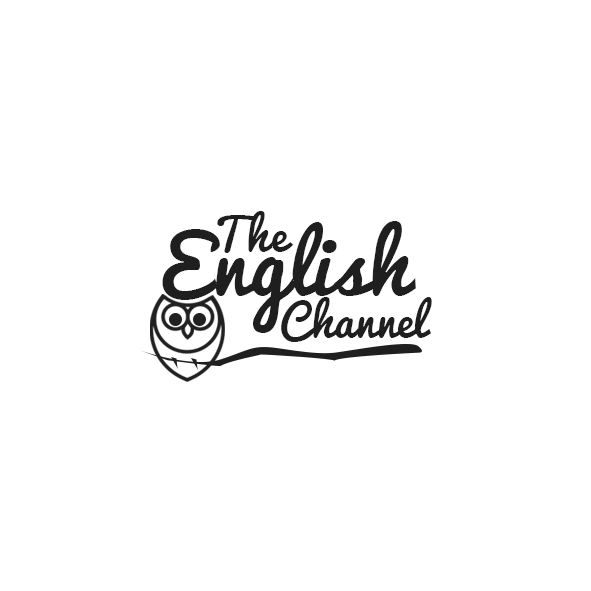
<style>
.page{position:relative;width:591px;height:591px;background:#ffffff}
.page>*{position:absolute;margin:0}
.t1{font:80.2px "Pacifico";letter-spacing:0.01em;color:#1f1f1f}
.t2{font:43.8px "Pacifico";letter-spacing:0.01em;color:#1f1f1f}
.t3{font:43.8px "Pacifico";color:#1f1f1f}
</style>
<div class="page">
<p class="t1" style="left:162px;top:221px;width:254px;height:112px">English</p>
<p class="t2" style="left:217px;top:211px;width:77px;height:42px">The</p>
<p class="t3" style="left:281px;top:297px;width:151px;height:45px">Channel</p>
</div>
